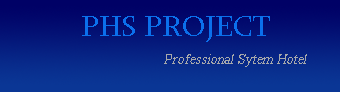
<style>
.page{position:relative;width:340px;height:92px}
.page>*{position:absolute;margin:0}
.t1{font:30px "Sylfaen";color:#0b70ec}
.t2{font:14px "TimesNewRomanPSMT";color:#a6a8ab;font-style:italic}
</style>
<div class="page">
<p class="t1" style="left:82px;top:16px;width:188px;height:26px">PHS PROJECT</p>
<p class="t2" style="left:164px;top:54px;width:143px;height:13px">Professional Sytem Hotel</p>
</div>
